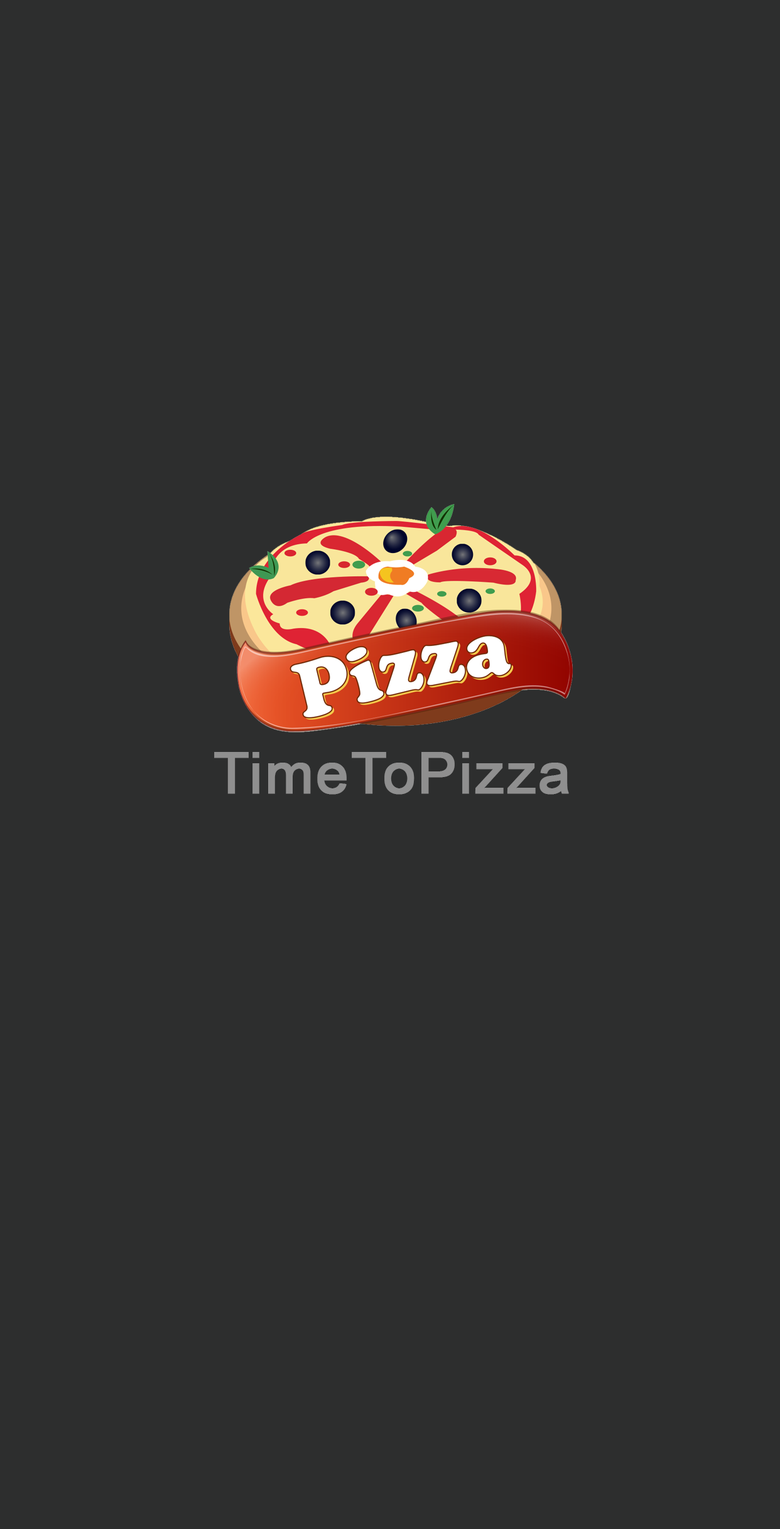
<style>
.page{position:relative;width:780px;height:1529px;background:#2d2e2e}
.page>*{position:absolute;margin:0}
.t1{font:57.3px "ArialMT";letter-spacing:0.025em;color:#8f8f8f;font-weight:bold}
</style>
<div class="page">
<p class="t1" style="left:214px;top:752px;width:355px;height:43px">TimeToPizza</p>
</div>
